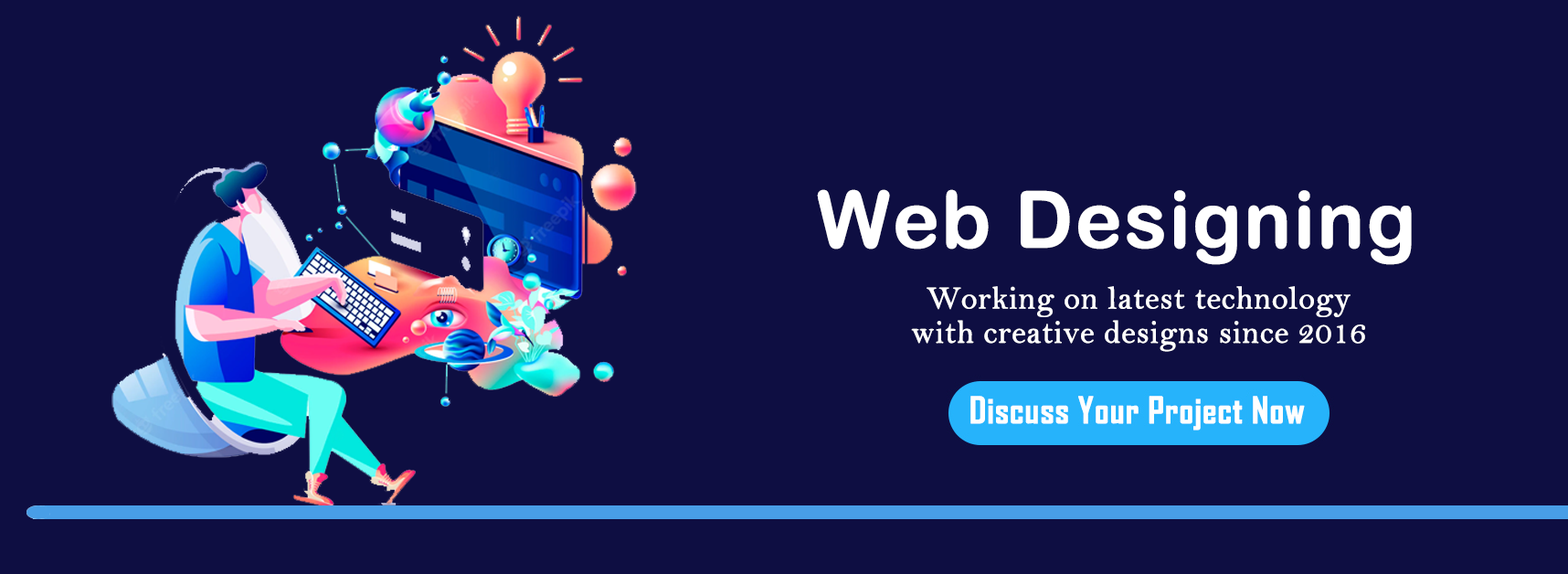
<style>
.page{position:relative;width:1568px;height:574px;background:#0e0e42}
.page>*{position:absolute;margin:0}
.t1{font:78.8px "ArialRoundedMTBold";color:#ffffff;font-weight:bold}
.t2{font:32.5px/34.2px "BellMT";color:#ffffff;font-weight:bold}
</style>
<div class="page">
<p class="t1" style="left:817px;top:189px;width:595px;height:76px">Web Designing</p>
<p class="t2" style="left:911px;top:286px;width:454px;height:66px;text-align:center">Working on latest technology<br>with creative designs since 2016</p>
</div>
